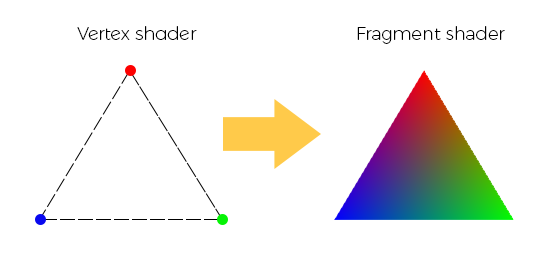
<style>
.page{position:relative;width:559px;height:253px;background:#ffffff}
.page>*{position:absolute;margin:0}
.t1{font:18px "MontserratAlternates-ExtraLight";color:#000000}
.t2{font:18px "Montserrat-ExtraLight";color:#000000}
</style>
<div class="page">
<p class="t1" style="left:77px;top:26px;width:120px;height:14px">Vertex shader</p>
<p class="t2" style="left:357px;top:26px;width:148px;height:18px">Fragment shader</p>
</div>
